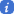
<style>
.page{position:relative;width:14px;height:14px;background:#3e71cf}
.page>*{position:absolute;margin:0}
.t1{font:15px "MonotypeCorsiva";color:#ffffff}
</style>
<div class="page">
<p class="t1" style="left:4px;top:2px;width:5px;height:11px">i</p>
</div>
